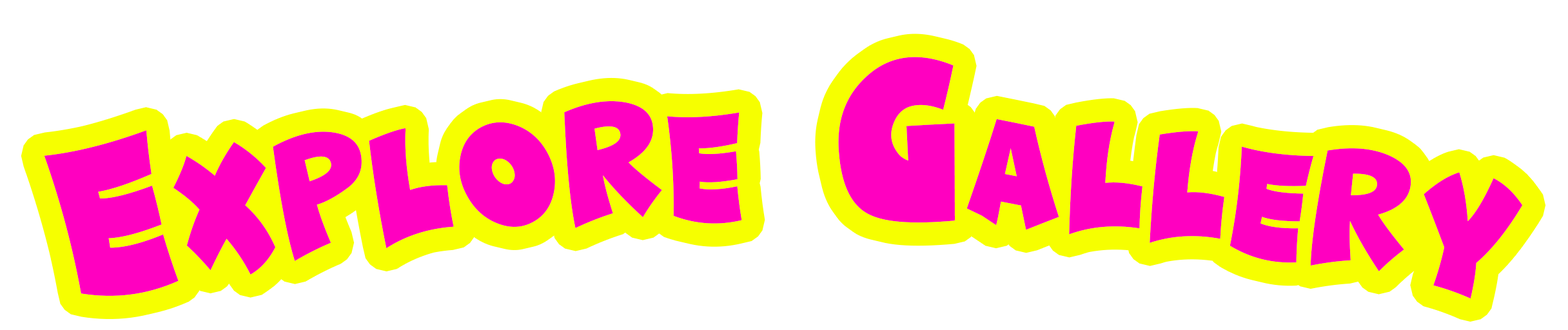
<style>
.page{position:relative;width:1568px;height:330px;background:#ffffff}
.page>*{position:absolute;margin:0}
.t1{font:206.3px "Funny&Cute";letter-spacing:0.05em;color:#ff00c0;font-variant:small-caps}
</style>
<div class="page">
<p class="t1" style="left:44px;top:57px;width:1479px;height:242px">Explore Gallery</p>
</div>
